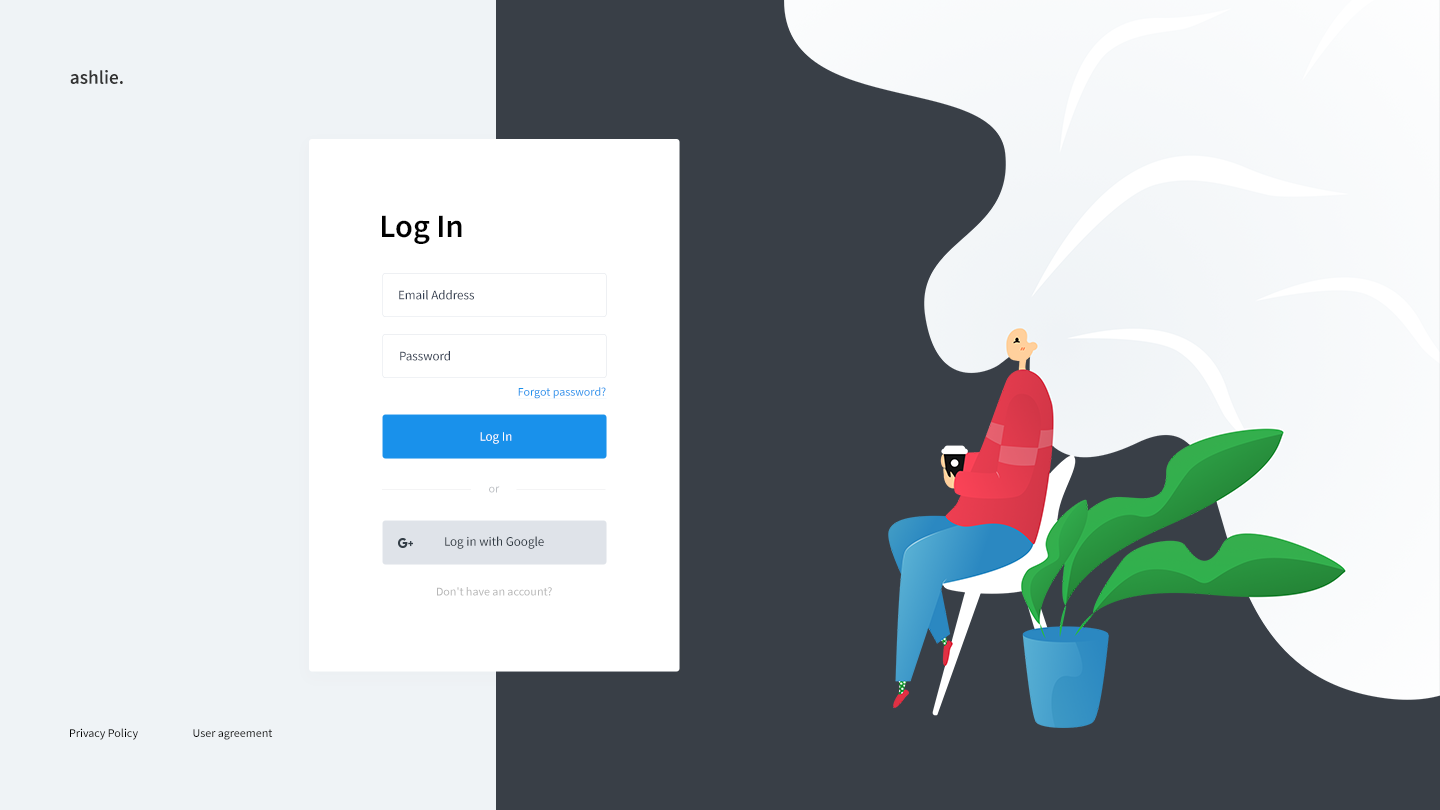
<style>
.page{position:relative;width:1440px;height:810px;background:#393f47}
.page>*{position:absolute;margin:0}
.t1{font:19.3px "SourceSansPro-SemiBold";color:#333333}
.t2{font:32.5px "SourceSansPro-SemiBold";color:#000000}
.t3{font:13px "SourceSansPro-Regular";color:#354052}
.t4{font:12px "SourceSansPro-Regular";color:#1991eb}
.t5{font:13px "SourceSansPro-Regular";color:#ffffff}
.t6{font:12px "SourceSansPro-Regular";color:#bdc0c4}
.t7{font:13px "SourceSansPro-Regular";color:#333d46}
.t8{font:12px "SourceSansPro-Regular";color:#b6b6b6}
.t9{font:12px "SourceSansPro-Regular";color:#000000}
</style>
<div class="page">
<p class="t1" style="left:70px;top:70px;width:53px;height:14px">ashlie.</p>
<p class="t2" style="left:382px;top:215px;width:80px;height:29px">Log In</p>
<p class="t3" style="left:399px;top:290px;width:75px;height:10px">Email Address</p>
<p class="t3" style="left:400px;top:351px;width:50px;height:10px">Password</p>
<p class="t4" style="left:518px;top:387px;width:88px;height:12px">Forgot password?</p>
<p class="t5" style="left:480px;top:432px;width:32px;height:12px">Log In</p>
<p class="t6" style="left:489px;top:486px;width:11px;height:7px">or</p>
<p class="t7" style="left:445px;top:536px;width:99px;height:13px">Log in with Google</p>
<p class="t8" style="left:437px;top:587px;width:115px;height:9px">Don't have an account?</p>
<p class="t9" style="left:70px;top:728px;width:68px;height:12px">Privacy Policy</p>
<p class="t9" style="left:193px;top:729px;width:80px;height:11px">User agreement</p>
</div>
